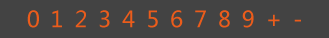
<style>
.page{position:relative;width:329px;height:38px;background:#434343}
.page>*{position:absolute;margin:0}
.t1{font:22px "MicrosoftYaHei";letter-spacing:0.5em;color:#eb5c1b}
</style>
<div class="page">
<p class="t1" style="left:27px;top:10px;width:274px;height:18px">0123456789+-</p>
</div>
